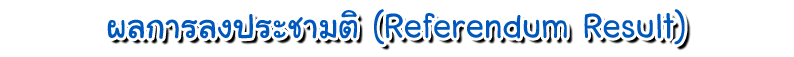
<style>
.page{position:relative;width:794px;height:57px;background:#ffffff}
.page>*{position:absolute;margin:0}
.t1{font:48px "LayijiMaHaNiYomV1.2";color:#0058bc}
</style>
<div class="page">
<p class="t1" style="left:107px;top:9px;width:578px;height:36px">ผลการลงประชามติ (Referendum Result)</p>
</div>
